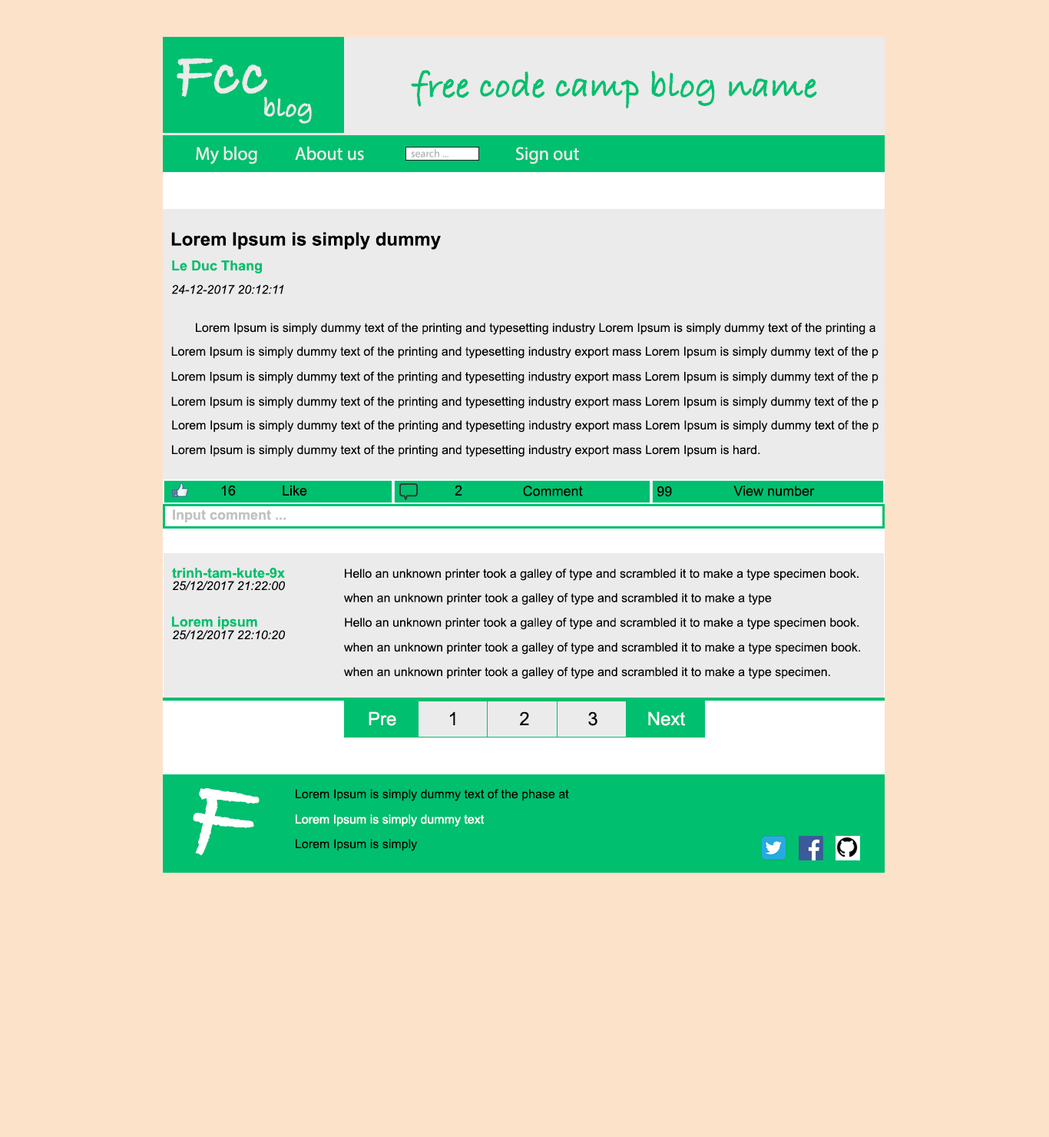
<style>
.page{position:relative;width:1049px;height:1137px;background:#fde2ca}
.page>*{position:absolute;margin:0}
.t1{font:65.3px "BradleyHandITCTT-Bold";color:#ebebeb}
.t2{font:36.9px "BradleyHandITCTT-Bold";color:#00bf6f}
.t3{font:27.6px "BradleyHandITCTT-Bold";color:#ebebeb}
.t4{font:18.4px "MyriadPro-Regular";color:#ebebeb}
.t5{font:10.8px "MyriadPro-Regular";color:#b7b7b7}
.t6{font:18.4px "Arial-BoldMT";color:#000000}
.t7{font:13.8px "Arial-BoldMT";color:#00bf6f}
.t8{font:12.3px "Arial-ItalicMT";color:#000000}
.t9{font:12.3px "ArialMT";color:#000000}
.t10{font:13.8px "ArialMT";color:#000000}
.t11{font:13.8px "Arial-BoldMT";color:#c2c2c2}
.t12{font:18.4px "ArialMT";color:#ffffff}
.t13{font:18.4px "ArialMT";color:#000000}
.t14{font:115.2px "BradleyHandITCTT-Bold";color:#ffffff}
.t15{font:12.3px "ArialMT";color:#ffffff}
</style>
<div class="page">
<p class="t1" style="left:177px;top:58px;width:90px;height:39px">Fcc</p>
<p class="t2" style="left:411px;top:70px;width:406px;height:38px">free code camp blog name</p>
<p class="t3" style="left:264px;top:97px;width:48px;height:27px">blog</p>
<p class="t4" style="left:196px;top:146px;width:61px;height:18px">My blog</p>
<p class="t4" style="left:295px;top:146px;width:69px;height:15px">About us</p>
<p class="t5" style="left:411px;top:149px;width:38px;height:8px">search ...</p>
<p class="t4" style="left:516px;top:147px;width:63px;height:17px">Sign out</p>
<p class="t6" style="left:171px;top:232px;width:270px;height:18px">Lorem Ipsum is simply dummy</p>
<p class="t7" style="left:172px;top:260px;width:90px;height:13px">Le Duc Thang</p>
<p class="t8" style="left:171px;top:284px;width:113px;height:10px">24-12-2017 20:12:11</p>
<p class="t9" style="left:196px;top:323px;width:680px;height:12px">Lorem Ipsum is simply dummy text of the printing and typesetting industry Lorem Ipsum is simply dummy text of the printing a</p>
<p class="t9" style="left:171px;top:346px;width:708px;height:13px">Lorem Ipsum is simply dummy text of the printing and typesetting industry export mass Lorem Ipsum is simply dummy text of the p</p>
<p class="t9" style="left:171px;top:371px;width:708px;height:12px">Lorem Ipsum is simply dummy text of the printing and typesetting industry export mass Lorem Ipsum is simply dummy text of the p</p>
<p class="t9" style="left:171px;top:396px;width:708px;height:13px">Lorem Ipsum is simply dummy text of the printing and typesetting industry export mass Lorem Ipsum is simply dummy text of the p</p>
<p class="t9" style="left:172px;top:420px;width:707px;height:12px">Lorem Ipsum is simply dummy text of the printing and typesetting industry export mass Lorem Ipsum is simply dummy text of the p</p>
<p class="t9" style="left:172px;top:445px;width:588px;height:12px">Lorem Ipsum is simply dummy text of the printing and typesetting industry export mass Lorem Ipsum is hard.</p>
<p class="t10" style="left:221px;top:485px;width:15px;height:11px">16</p>
<p class="t10" style="left:283px;top:485px;width:24px;height:11px">Like</p>
<p class="t10" style="left:455px;top:485px;width:7px;height:10px">2</p>
<p class="t10" style="left:523px;top:485px;width:60px;height:11px">Comment</p>
<p class="t10" style="left:657px;top:485px;width:15px;height:12px">99</p>
<p class="t10" style="left:733px;top:485px;width:82px;height:11px">View number</p>
<p class="t11" style="left:173px;top:509px;width:113px;height:13px">Input comment ...</p>
<p class="t7" style="left:172px;top:568px;width:113px;height:10px">trinh-tam-kute-9x</p>
<p class="t9" style="left:345px;top:568px;width:514px;height:13px">Hello an unknown printer took a galley of type and scrambled it to make a type specimen book.</p>
<p class="t8" style="left:172px;top:581px;width:113px;height:10px">25/12/2017 21:22:00</p>
<p class="t9" style="left:344px;top:593px;width:428px;height:12px">when an unknown printer took a galley of type and scrambled it to make a type</p>
<p class="t7" style="left:172px;top:616px;width:85px;height:14px">Lorem ipsum</p>
<p class="t9" style="left:345px;top:617px;width:514px;height:13px">Hello an unknown printer took a galley of type and scrambled it to make a type specimen book.</p>
<p class="t8" style="left:172px;top:630px;width:113px;height:10px">25/12/2017 22:10:20</p>
<p class="t9" style="left:344px;top:642px;width:516px;height:12px">when an unknown printer took a galley of type and scrambled it to make a type specimen book.</p>
<p class="t9" style="left:344px;top:667px;width:486px;height:12px">when an unknown printer took a galley of type and scrambled it to make a type specimen.</p>
<p class="t12" style="left:369px;top:711px;width:27px;height:15px">Pre</p>
<p class="t13" style="left:450px;top:711px;width:5px;height:14px">1</p>
<p class="t13" style="left:520px;top:711px;width:9px;height:14px">2</p>
<p class="t13" style="left:588px;top:711px;width:10px;height:15px">3</p>
<p class="t12" style="left:648px;top:711px;width:37px;height:15px">Next</p>
<p class="t14" style="left:193px;top:788px;width:67px;height:68px;rotate:10deg">F</p>
<p class="t9" style="left:296px;top:789px;width:273px;height:12px">Lorem Ipsum is simply dummy text of the phase at</p>
<p class="t15" style="left:296px;top:814px;width:189px;height:12px">Lorem Ipsum is simply dummy text</p>
<p class="t9" style="left:296px;top:839px;width:122px;height:12px">Lorem Ipsum is simply</p>
</div>
